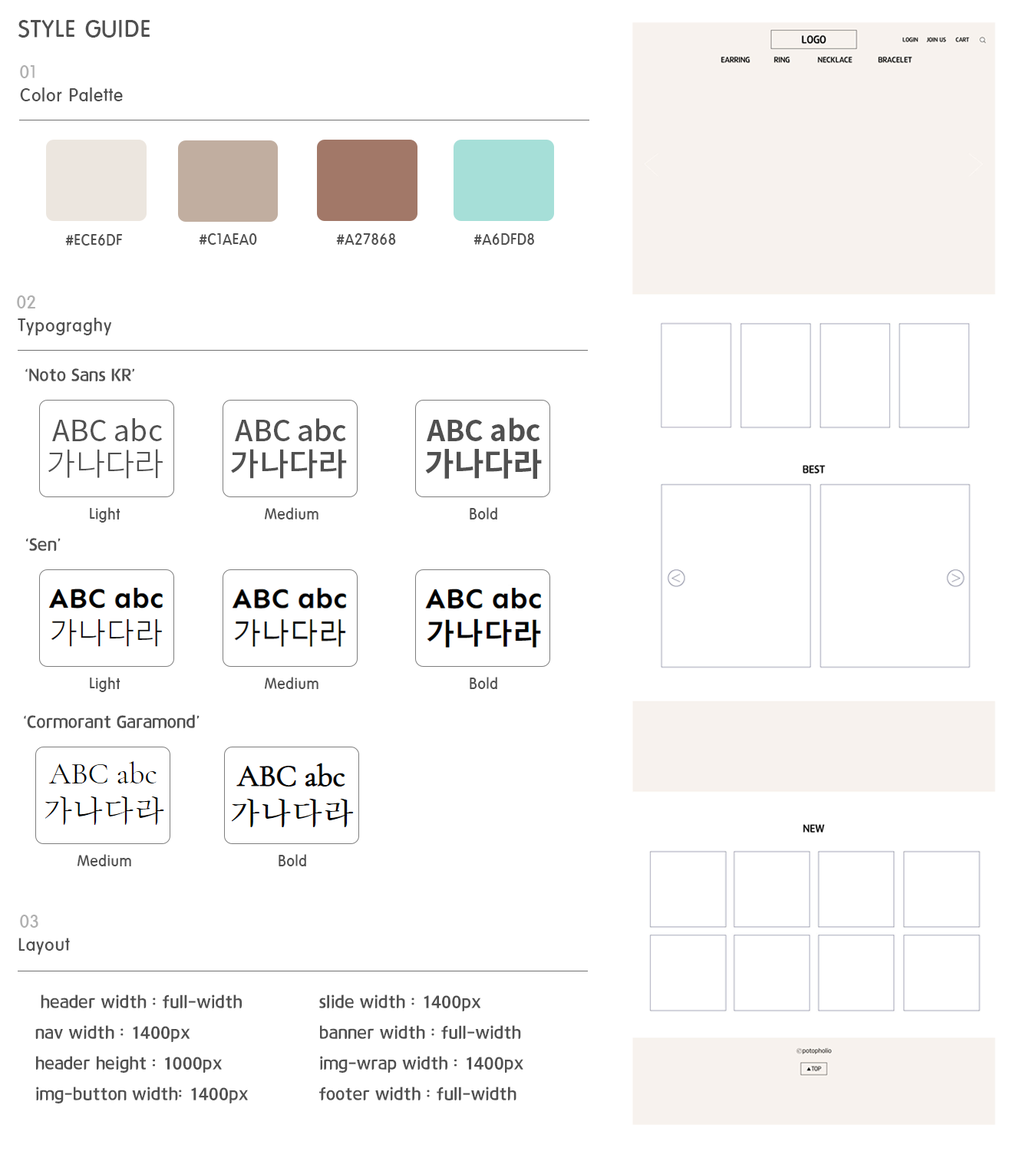
<style>
.page{position:relative;width:1036px;height:1151px;background:#ffffff}
.page>*{position:absolute;margin:0}
.t1{font:25.6px "HYkanB";color:#505050}
.t2{font:19.2px "HYkanB";color:#b0b0b0}
.t3{font:19.2px "HYkanB";color:#505050}
.t4{font:16px "HYkanB";color:#505050}
.t5{font:17.6px "12LotteMartHappyMedium";color:#505050}
.t6{font:28.8px "NotoSansCJKkr-Regular";color:#505050}
.t7{font:28.8px "NotoSansCJKkr-Medium";color:#505050}
.t8{font:28.8px "NotoSansCJKkr-Bold";color:#505050}
.t9{font:32px "NotoSansCJKkr-Light";color:#505050}
.t10{font:32px "NotoSansCJKkr-Medium";color:#505050}
.t11{font:32px "NotoSansCJKkr-Bold";color:#505050}
.t12{font:32px "12LotteMartHLight"}
.t13{font:32px "12LotteMartHappyMedium"}
.t14{font:32px "12LotteMartHappyBold"}
</style>
<div class="page">
<p class="t1" style="left:18px;top:19px;width:132px;height:19px">STYLE GUIDE</p>
<p class="t2" style="left:20px;top:65px;width:15px;height:13px">01</p>
<p class="t3" style="left:20px;top:87px;width:103px;height:15px">Color Palette</p>
<p class="t4" style="left:199px;top:233px;width:58px;height:12px">#C1AEA0</p>
<p class="t4" style="left:336px;top:233px;width:60px;height:12px">#A27868</p>
<p class="t4" style="left:473px;top:233px;width:61px;height:12px">#A6DFD8</p>
<p class="t4" style="left:65px;top:234px;width:57px;height:12px">#ECE6DF</p>
<p class="t2" style="left:17px;top:295px;width:18px;height:13px">02</p>
<p class="t3" style="left:18px;top:318px;width:94px;height:18px">Typograghy</p>
<p class="t5" style="left:25px;top:368px;width:109px;height:13px">‘Noto Sans KR’</p>
<p class="t6" style="left:52px;top:418px;width:110px;height:23px">ABC abc</p>
<p class="t7" style="left:235px;top:418px;width:111px;height:23px">ABC abc</p>
<p class="t8" style="left:427px;top:417px;width:113px;height:24px">ABC abc</p>
<p class="t9" style="left:48px;top:449px;width:115px;height:30px">가나다라</p>
<p class="t10" style="left:231px;top:449px;width:116px;height:30px">가나다라</p>
<p class="t11" style="left:425px;top:449px;width:117px;height:30px">가나다라</p>
<p class="t4" style="left:90px;top:507px;width:30px;height:16px">Light</p>
<p class="t4" style="left:264px;top:507px;width:54px;height:13px">Medium</p>
<p class="t4" style="left:470px;top:507px;width:27px;height:13px">Bold</p>
<p class="t5" style="left:26px;top:538px;width:35px;height:13px">‘Sen’</p>
<p class="t12" style="left:50px;top:619px;width:113px;height:29px">가나다라</p>
<p class="t13" style="left:233px;top:619px;width:115px;height:29px">가나다라</p>
<p class="t14" style="left:428px;top:619px;width:114px;height:29px">가나다라</p>
<p class="t4" style="left:90px;top:677px;width:30px;height:15px">Light</p>
<p class="t4" style="left:264px;top:677px;width:54px;height:12px">Medium</p>
<p class="t4" style="left:470px;top:677px;width:27px;height:12px">Bold</p>
<p class="t5" style="left:24px;top:714px;width:176px;height:14px">‘Cormorant Garamond’</p>
<p class="t4" style="left:77px;top:854px;width:54px;height:12px">Medium</p>
<p class="t4" style="left:279px;top:854px;width:27px;height:12px">Bold</p>
<p class="t2" style="left:20px;top:915px;width:18px;height:13px">03</p>
<p class="t3" style="left:18px;top:938px;width:52px;height:17px">Layout</p>
<p class="t5" style="left:35px;top:995px;width:213px;height:108px">header width : full-width<br>nav width : 1400px<br>header height : 1000px<br>img-button width: 1400px</p>
<p class="t5" style="left:319px;top:995px;width:204px;height:105px">slide width : 1400px<br>banner width : full-width<br>img-wrap width : 1400px<br>footer width : full-width</p>
</div>
